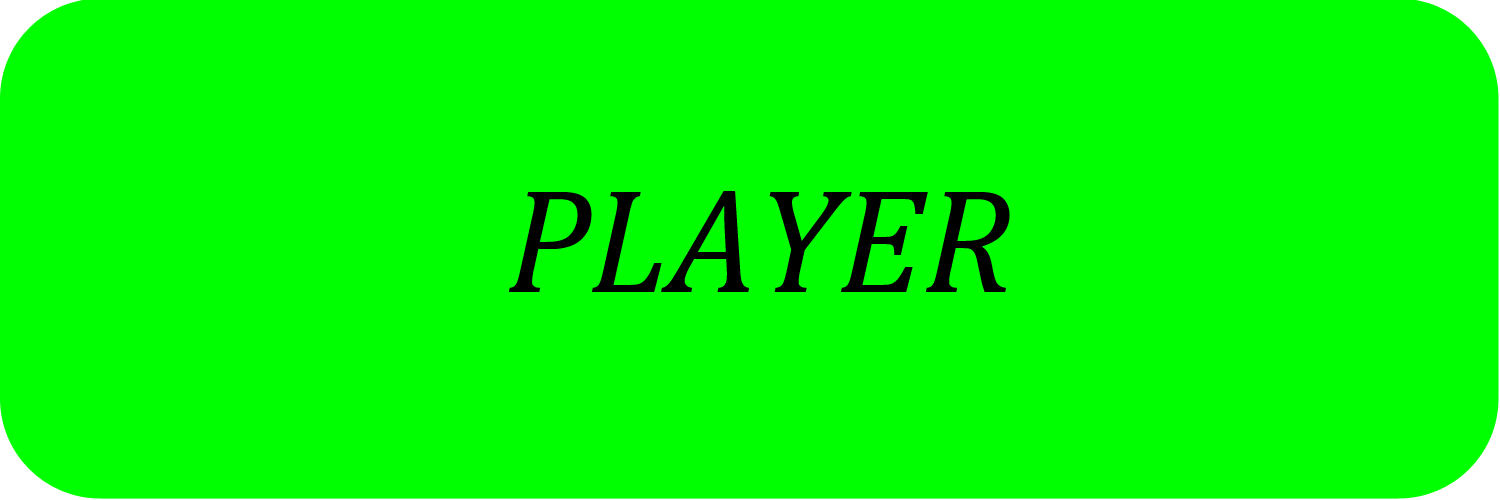
<style>
.page{position:relative;width:1500px;height:500px;background:#00ff00}
.page>*{position:absolute;margin:0}
.t1{font:150px "Cambria-Italic";color:#000000}
</style>
<div class="page">
<p class="t1" style="left:509px;top:191px;width:501px;height:101px">PLAYER</p>
</div>
